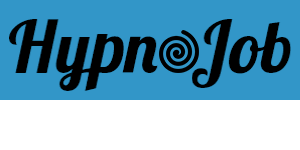
<style>
.page{position:relative;width:300px;height:150px;background:#3296c8}
.page>*{position:absolute;margin:0}
.t1{font:72.2px "Lobster1.4";color:#000000}
</style>
<div class="page">
<p class="t1" style="left:9px;top:19px;width:149px;height:72px">Hypn</p>
<p class="t1" style="left:192px;top:19px;width:99px;height:69px">Job</p>
</div>
